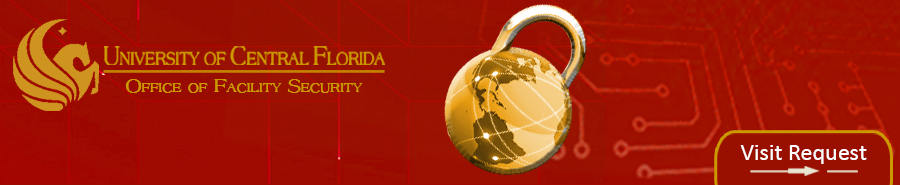
<style>
.page{position:relative;width:900px;height:185px}
.page>*{position:absolute;margin:0}
.t1{font:13.1px "Americana";color:#cc9900}
.t2{font:19.7px "Americana";color:#cc9900}
.t3{font:24px "Calibri";color:#ffffff}
</style>
<div class="page">
<p class="t1" style="left:126px;top:79px;width:237px;height:14px"><span class="t2">O</span>FFICE OF<span class="t2"> F</span>ACILITY<span class="t2"> S</span>ECURITY</p>
<p class="t1" style="left:126px;top:79px;width:237px;height:14px"><span class="t2">O</span>FFICE OF<span class="t2"> F</span>ACILITY<span class="t2"> S</span>ECURITY</p>
<p class="t3" style="left:740px;top:145px;width:127px;height:19px">Visit Request</p>
</div>
